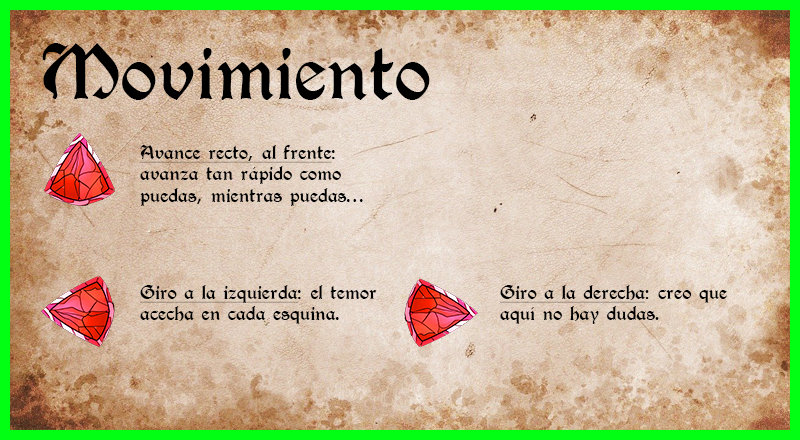
<style>
.page{position:relative;width:800px;height:440px}
.page>*{position:absolute;margin:0}
.t1{font:72px "T4C-Beaulieux";color:#000000}
.t2{font:18px "T4C-Beaulieux";color:#000000}
.t3{font:18px "T4C-Beaulieux";color:#000000;text-decoration:underline}
</style>
<div class="page">
<p class="t1" style="left:42px;top:43px;width:388px;height:57px">Movimiento</p>
<p class="t2" style="left:140px;top:145px;width:223px;height:61px"><span class="t3">Avance recto, al frente</span>: avanza tan rápido como puedas, mientras puedas...</p>
<p class="t2" style="left:140px;top:285px;width:237px;height:39px"><span class="t3">Giro a la izquierda</span>: el temor acecha en cada esquina.</p>
<p class="t2" style="left:500px;top:285px;width:227px;height:39px"><span class="t3">Giro a la derecha</span>: creo que aquí no hay dudas.</p>
</div>
